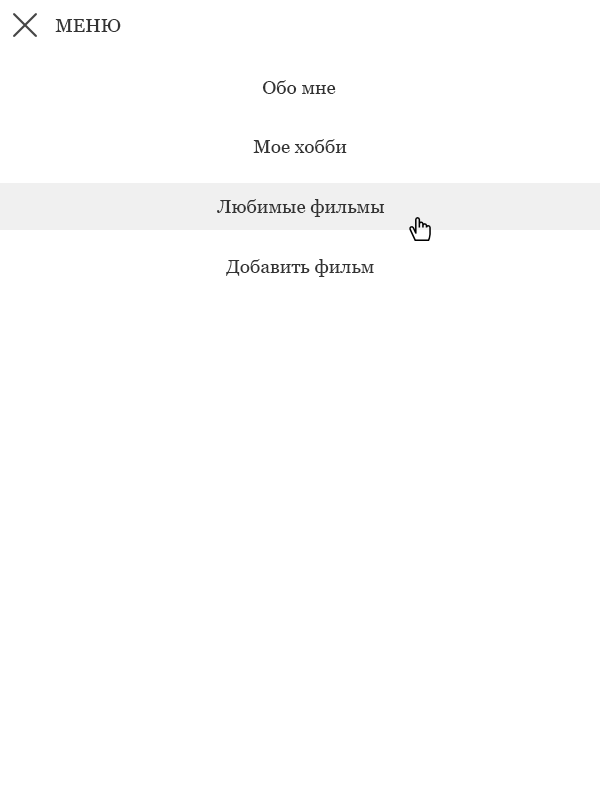
<style>
.page{position:relative;width:600px;height:800px;background:#ffffff}
.page>*{position:absolute;margin:0}
.t1{font:19px "Georgia";color:#333333}
</style>
<div class="page">
<p class="t1" style="left:55px;top:19px;width:66px;height:13px">МЕНЮ</p>
<p class="t1" style="left:262px;top:80px;width:74px;height:14px">Обо мне</p>
<p class="t1" style="left:253px;top:139px;width:94px;height:14px">Мое хобби</p>
<p class="t1" style="left:217px;top:199px;width:168px;height:18px">Любимые фильмы</p>
<p class="t1" style="left:226px;top:259px;width:148px;height:18px">Добавить фильм</p>
</div>
